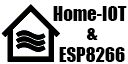
<style>
.page{position:relative;width:128px;height:64px;background:#ffffff}
.page>*{position:absolute;margin:0}
.t1{font:18.7px "Impact";color:#000000}
</style>
<div class="page">
<p class="t1" style="left:53px;top:6px;width:74px;height:15px">Home-IOT</p>
<p class="t1" style="left:86px;top:28px;width:12px;height:12px">&amp;</p>
<p class="t1" style="left:59px;top:47px;width:66px;height:15px">ESP8266</p>
</div>
